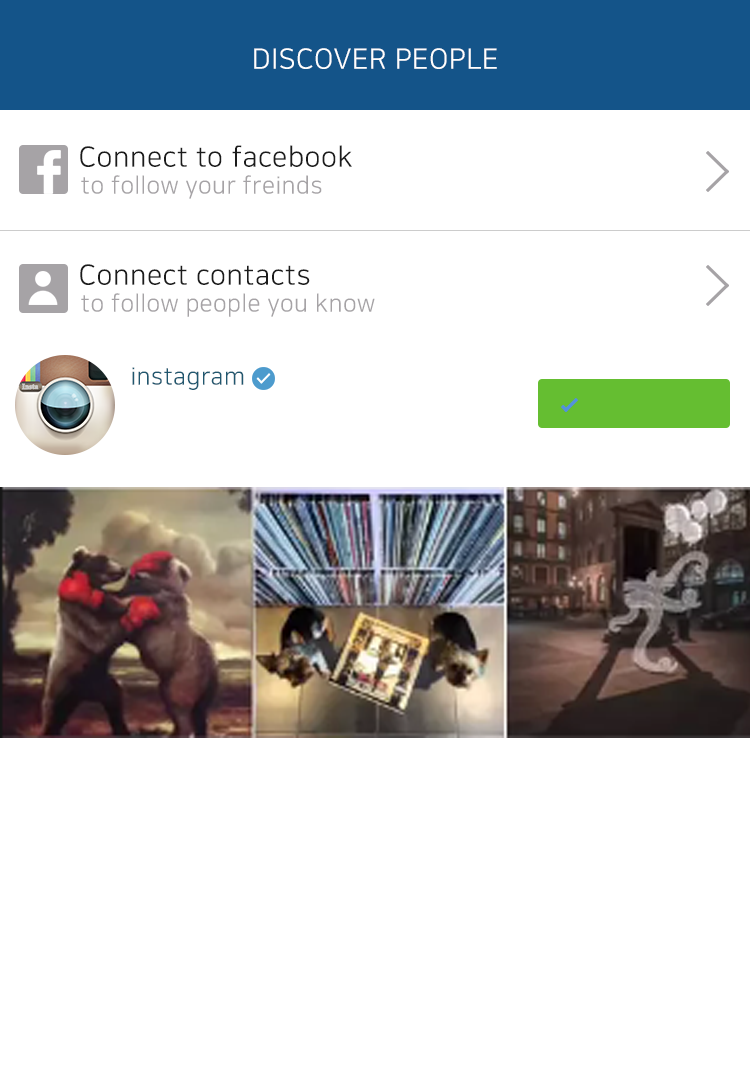
<style>
.page{position:relative;width:750px;height:1080px;background:#ffffff}
.page>*{position:absolute;margin:0}
.t1{font:28px "NanumSquareR";letter-spacing:0.02em;color:#ffffff}
.t2{font:28px "NanumSquareR";letter-spacing:0.02em;color:#1b1b1b}
.t3{font:24px "NanumSquareR";letter-spacing:0.02em;color:#a6a3a6}
.t4{font:24px "NanumSquareR";letter-spacing:0.02em;color:#20576f}
</style>
<div class="page">
<p class="t1" style="left:254px;top:48px;width:243px;height:21px">DISCOVER PEOPLE</p>
<p class="t2" style="left:80px;top:145px;width:272px;height:22px">Connect to facebook</p>
<p class="t3" style="left:81px;top:175px;width:241px;height:24px">to follow your freinds</p>
<p class="t2" style="left:80px;top:264px;width:230px;height:21px">Connect contacts</p>
<p class="t3" style="left:81px;top:293px;width:294px;height:24px">to follow people you know</p>
<p class="t4" style="left:132px;top:367px;width:112px;height:23px">instagram</p>
</div>
